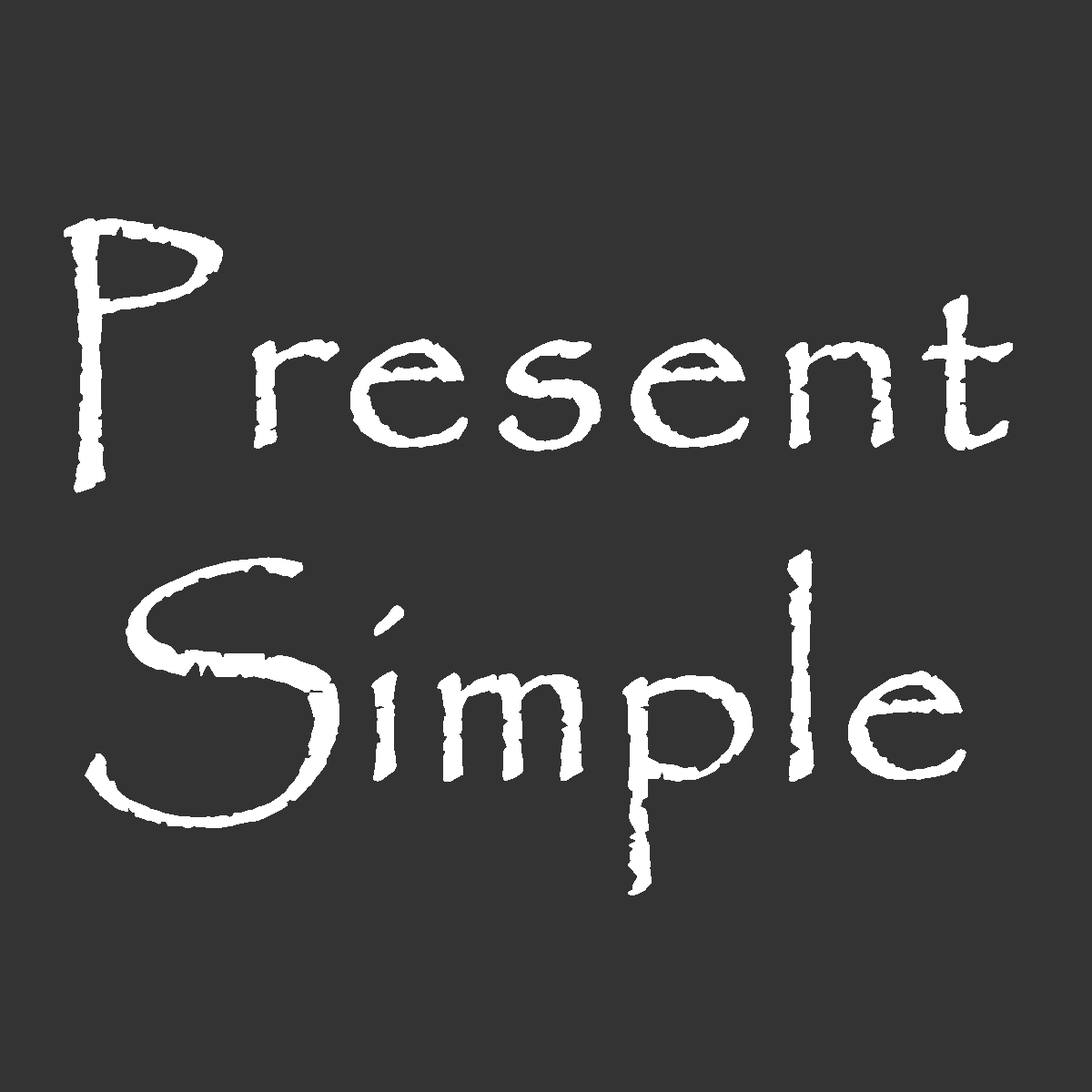
<style>
.page{position:relative;width:1092px;height:1092px;background:#333333}
.page>*{position:absolute;margin:0}
.t1{font:276.8px "Papyrus-Regular";color:#ffffff;font-weight:bold}
</style>
<div class="page">
<p class="t1" style="left:64px;top:218px;width:949px;height:677px;text-align:center">Present<br>Simple</p>
</div>
